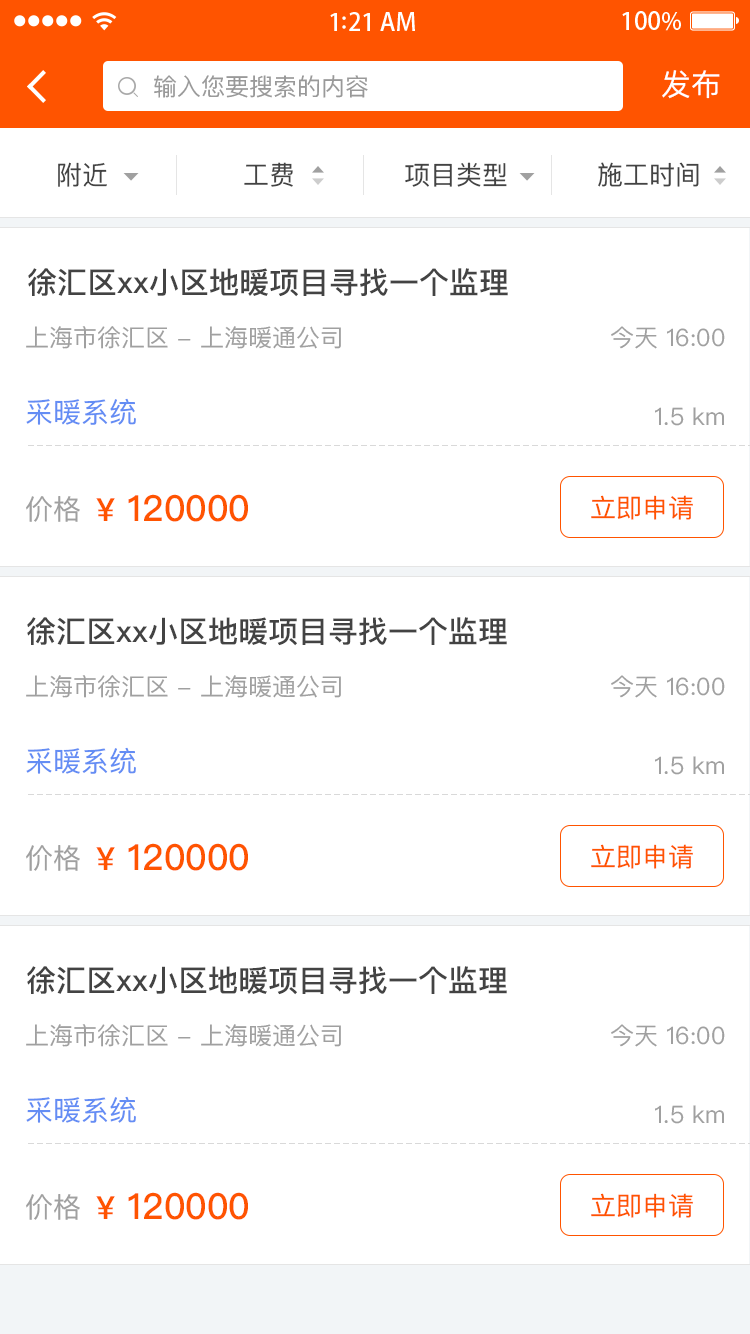
<style>
.page{position:relative;width:750px;height:1334px;background:#ffffff}
.page>*{position:absolute;margin:0}
.t1{font:24px "PingFangSC-Regular";color:#999999}
.t2{font:30px "PingFangSC-Regular";color:#ffffff}
.t3{font:26px "PingFangSC-Regular";color:#434343}
.t4{font:30px "PingFangSC-Medium";color:#434343}
.t5{font:24px "PingFangSC-Regular";color:#a0a0a0}
.t6{font:28px "PingFangSC-Regular";color:#648df4}
.t7{font:28px "PingFangSC-Regular";color:#a0a0a0}
.t8{font:36px "PingFangSC-Medium";color:#ff5400}
.t9{font:32px "PingFangSC-Medium";color:#ff5400}
.t10{font:26px "PingFangSC-Regular";color:#ff5400}
</style>
<div class="page">
<p class="t1" style="left:154px;top:75px;width:214px;height:23px">输入您要搜索的内容</p>
<p class="t2" style="left:662px;top:70px;width:58px;height:29px">发布</p>
<p class="t3" style="left:58px;top:162px;width:49px;height:25px">附近</p>
<p class="t3" style="left:244px;top:162px;width:49px;height:25px">工费</p>
<p class="t3" style="left:405px;top:162px;width:102px;height:25px">项目类型</p>
<p class="t3" style="left:598px;top:162px;width:101px;height:25px">施工时间</p>
<p class="t4" style="left:28px;top:268px;width:480px;height:29px">徐汇区xx小区地暖项目寻找一个监理</p>
<p class="t5" style="left:26px;top:326px;width:315px;height:23px">上海市徐汇区 - 上海暖通公司</p>
<p class="t5" style="left:611px;top:326px;width:114px;height:23px">今天 16:00</p>
<p class="t6" style="left:26px;top:398px;width:110px;height:27px">采暖系统</p>
<p class="t5" style="left:655px;top:407px;width:69px;height:19px">1.5 km</p>
<p class="t7" style="left:26px;top:496px;width:54px;height:26px">价格</p>
<p class="t8" style="left:96px;top:494px;width:152px;height:28px"><span class="t9">¥</span> 120000</p>
<p class="t10" style="left:591px;top:495px;width:102px;height:25px">立即申请</p>
<p class="t4" style="left:27px;top:617px;width:480px;height:29px">徐汇区xx小区地暖项目寻找一个监理</p>
<p class="t5" style="left:26px;top:675px;width:315px;height:23px">上海市徐汇区 - 上海暖通公司</p>
<p class="t5" style="left:611px;top:675px;width:114px;height:23px">今天 16:00</p>
<p class="t6" style="left:26px;top:747px;width:110px;height:27px">采暖系统</p>
<p class="t5" style="left:655px;top:756px;width:69px;height:19px">1.5 km</p>
<p class="t7" style="left:26px;top:845px;width:54px;height:26px">价格</p>
<p class="t8" style="left:96px;top:843px;width:152px;height:28px"><span class="t9">¥</span> 120000</p>
<p class="t10" style="left:591px;top:844px;width:102px;height:25px">立即申请</p>
<p class="t4" style="left:27px;top:966px;width:480px;height:29px">徐汇区xx小区地暖项目寻找一个监理</p>
<p class="t5" style="left:26px;top:1024px;width:315px;height:23px">上海市徐汇区 - 上海暖通公司</p>
<p class="t5" style="left:611px;top:1024px;width:114px;height:23px">今天 16:00</p>
<p class="t6" style="left:26px;top:1096px;width:110px;height:27px">采暖系统</p>
<p class="t5" style="left:655px;top:1105px;width:69px;height:19px">1.5 km</p>
<p class="t8" style="left:96px;top:1192px;width:152px;height:28px"><span class="t9">¥</span> 120000</p>
<p class="t10" style="left:591px;top:1193px;width:102px;height:25px">立即申请</p>
<p class="t7" style="left:26px;top:1194px;width:54px;height:26px">价格</p>
</div>
